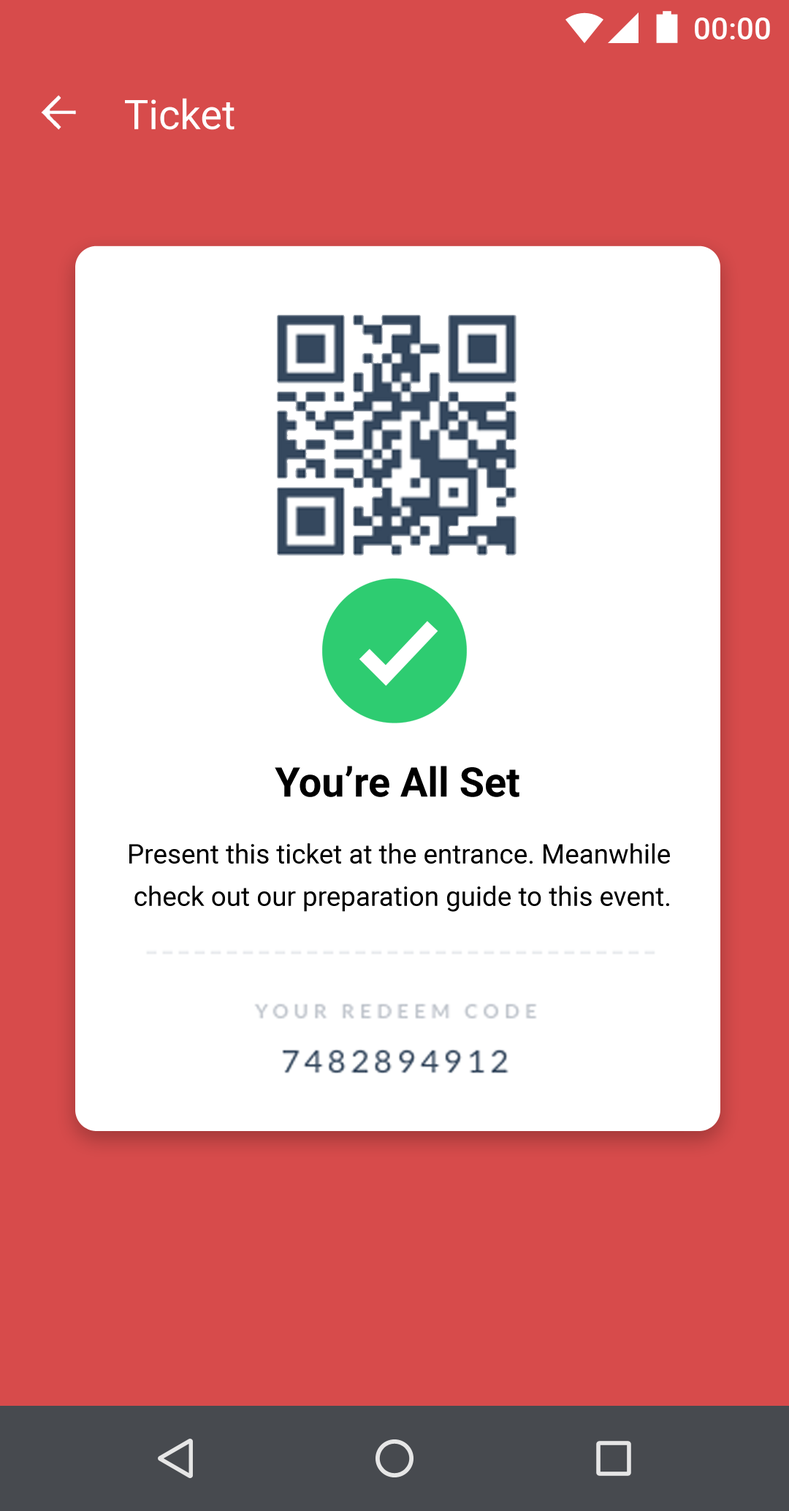
<style>
.page{position:relative;width:789px;height:1511px;background:#ffffff}
.page>*{position:absolute;margin:0}
.t1{font:30.7px "Roboto-Medium";color:#ffffff}
.t2{font:40.9px "Roboto-Regular";color:#ffffff}
.t3{font:40.7px "Roboto-Bold";color:#000000}
.t4{font:26.9px/42.4px "Roboto-Regular";color:#000000}
</style>
<div class="page">
<p class="t1" style="left:695px;top:18px;width:75px;height:21px">00:00</p>
<p class="t2" style="left:125px;top:98px;width:110px;height:32px">Ticket</p>
<p class="t3" style="left:275px;top:766px;width:245px;height:31px">You’re All Set</p>
<p class="t4" style="left:129px;top:843px;width:541px;height:69px;text-align:center">Present this ticket at the entrance. Meanwhile <br>check out our preparation guide to this event.</p>
</div>
